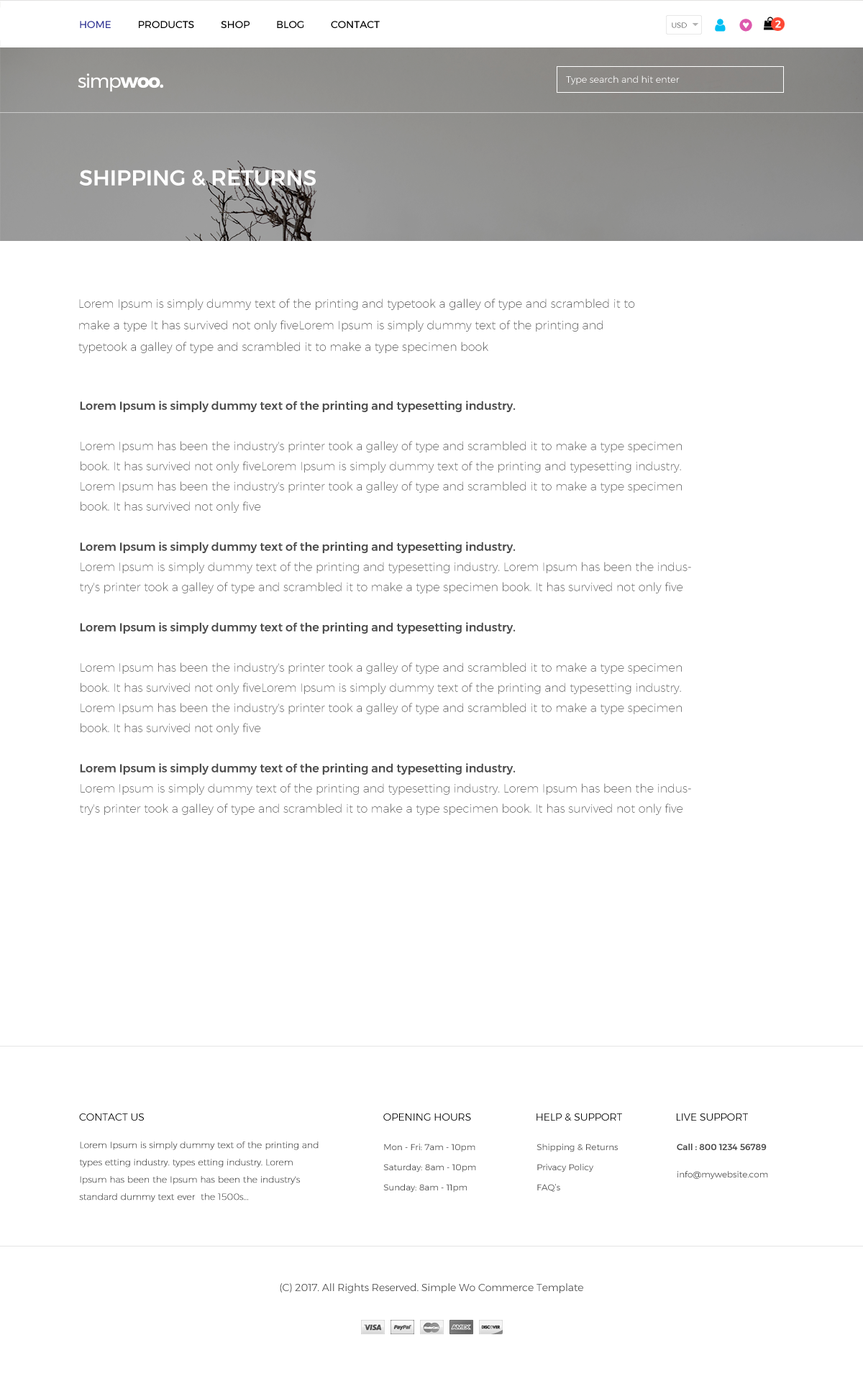
<style>
.page{position:relative;width:863px;height:1381px;background:#ffffff}
.page>*{position:absolute;margin:0}
.t1{font:10.1px "Montserrat-Regular";color:#000000;text-transform:uppercase}
.t2{font:10.1px "Montserrat-Regular";color:#2e3192;text-transform:uppercase}
.t3{font:7.2px "Montserrat-Light"}
.t4{font:10.1px "Montserrat-SemiBold";color:#ffffff;text-transform:uppercase}
.t5{font:19.2px "Montserrat-Regular";letter-spacing:-0.06em;color:#ffffff}
.t6{font:19.2px "Montserrat-Bold";letter-spacing:-0.06em;color:#ffffff}
.t7{font:9.1px "Montserrat-Light";color:#ffffff}
.t8{font:21.7px "Montserrat-Medium";color:#ffffff;text-transform:uppercase}
.t9{font:11.5px/21.6px "Montserrat-ExtraLight";color:#464646}
.t10{font:11.5px/20.1px "Montserrat-ExtraLight";color:#4c4c4c}
.t11{font:11.5px/20.1px "Montserrat-Medium";color:#4c4c4c}
.t12{font:10.1px "Montserrat-Light";color:#000000;text-transform:uppercase}
.t13{font:8.6px/17.3px "Montserrat-Thin";color:#464646;font-weight:bold}
.t14{font:8.6px/20.1px "Montserrat-Light";color:#464646}
.t15{font:8.6px/27.3px "Montserrat-Light";color:#464646}
.t16{font:8.6px/27.3px "Montserrat-Medium";color:#464646}
.t17{font:10.1px "Montserrat-Light";color:#464646}
</style>
<div class="page">
<p class="t1" style="left:80px;top:21px;width:300px;height:7px"><span class="t2">Home</span>          Products          Shop          Blog          Contact</p>
<p class="t3" style="left:672px;top:22px;width:15px;height:6px">USD</p>
<p class="t4" style="left:776px;top:20px;width:5px;height:8px">2</p>
<p class="t5" style="left:78px;top:73px;width:85px;height:19px">simp<span class="t6">woo.</span></p>
<p class="t7" style="left:566px;top:76px;width:114px;height:9px">Type search and hit enter</p>
<p class="t8" style="left:79px;top:170px;width:237px;height:16px">Shipping &amp; Returns</p>
<p class="t9" style="left:78px;top:299px;width:557px;height:54px">Lorem Ipsum is simply dummy text of the printing and typetook a galley of type and scrambled it to make a type It has survived not only fiveLorem Ipsum is simply dummy text of the printing and typetook a galley of type and scrambled it to make a type specimen book</p>
<p class="t10" style="left:80px;top:401px;width:611px;height:414px"><span class="t11">Lorem Ipsum is simply dummy text of the printing and typesetting industry. <br><br></span>Lorem Ipsum has been the industry's printer took a galley of type and scrambled it to make a type specimen book. It has survived not only fiveLorem Ipsum is simply dummy text of the printing and typesetting industry. Lorem Ipsum has been the industry's printer took a galley of type and scrambled it to make a type specimen book. It has survived not only five<br><br><span class="t11">Lorem Ipsum is simply dummy text of the printing and typesetting industry. <br></span>Lorem Ipsum is simply dummy text of the printing and typesetting industry. Lorem Ipsum has been the industry's printer took a galley of type and scrambled it to make a type specimen book. It has survived not only five<br><br><span class="t11">Lorem Ipsum is simply dummy text of the printing and typesetting industry. <br><br></span>Lorem Ipsum has been the industry's printer took a galley of type and scrambled it to make a type specimen book. It has survived not only fiveLorem Ipsum is simply dummy text of the printing and typesetting industry. Lorem Ipsum has been the industry's printer took a galley of type and scrambled it to make a type specimen book. It has survived not only five<br><br><span class="t11">Lorem Ipsum is simply dummy text of the printing and typesetting industry. <br></span>Lorem Ipsum is simply dummy text of the printing and typesetting industry. Lorem Ipsum has been the industry's printer took a galley of type and scrambled it to make a type specimen book. It has survived not only five</p>
<p class="t12" style="left:79px;top:1114px;width:65px;height:7px">contact us</p>
<p class="t12" style="left:383px;top:1114px;width:88px;height:7px">opening hours</p>
<p class="t12" style="left:537px;top:1114px;width:85px;height:7px">Help &amp; support</p>
<p class="t12" style="left:677px;top:1114px;width:71px;height:7px">live support</p>
<p class="t13" style="left:79px;top:1142px;width:240px;height:60px">Lorem Ipsum is simply dummy text of the printing and types etting industry. types etting industry. Lorem Ipsum has been the Ipsum has been the industry's standard dummy text ever  the 1500s...</p>
<p class="t14" style="left:383px;top:1144px;width:93px;height:49px">Mon - Fri: 7am - 10pm<br>​​Saturday: 8am - 10pm<br>​Sunday: 8am - 11pm</p>
<p class="t14" style="left:537px;top:1144px;width:81px;height:48px"><span class="t15">Shipping &amp; Returns<br></span>Privacy Policy<br>FAQ’s</p>
<p class="t16" style="left:677px;top:1144px;width:91px;height:36px">Call : 800 1234 56789<br><span class="t15">info@mywebsite.com</span></p>
<p class="t17" style="left:280px;top:1283px;width:303px;height:10px">(C) 2017. All Rights Reserved. Simple Wo Commerce Template</p>
</div>
